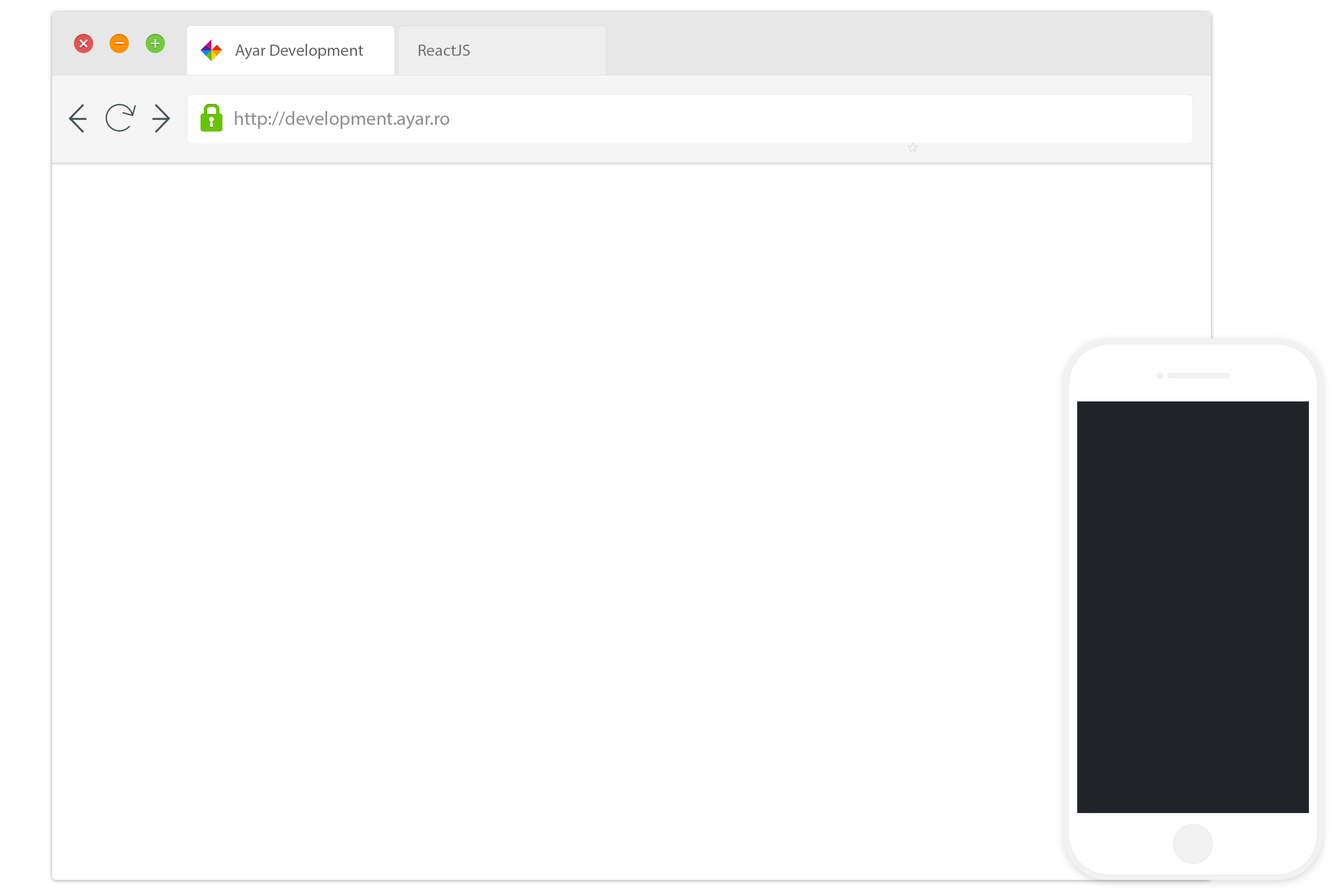
<style>
.page{position:relative;width:1337px;height:892px;background:#ffffff}
.page>*{position:absolute;margin:0}
.t1{font:16.5px "MyriadPro-Regular";color:#636363}
.t2{font:16.5px "MyriadPro-Regular";color:#717171}
.t3{font:19.3px "MyriadPro-Regular";color:#8e8e8e}
</style>
<div class="page">
<p class="t1" style="left:235px;top:44px;width:128px;height:15px">Ayar Development</p>
<p class="t2" style="left:419px;top:45px;width:51px;height:11px">ReactJS</p>
<p class="t3" style="left:235px;top:111px;width:214px;height:18px">http://development.ayar.ro</p>
</div>
